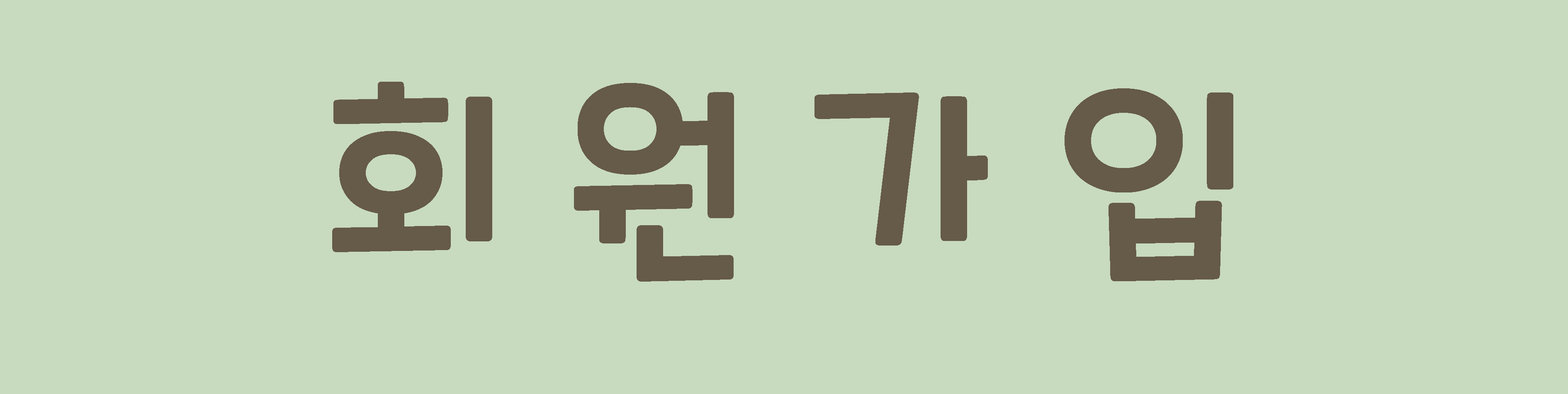
<style>
.page{position:relative;width:1568px;height:394px;background:#c8dbbe}
.page>*{position:absolute;margin:0}
.t1{font:207.4px "CookieRun-Regular";color:#665a48}
</style>
<div class="page">
<p class="t1" style="left:332px;top:82px;width:901px;height:200px">회 원 가 입</p>
</div>
